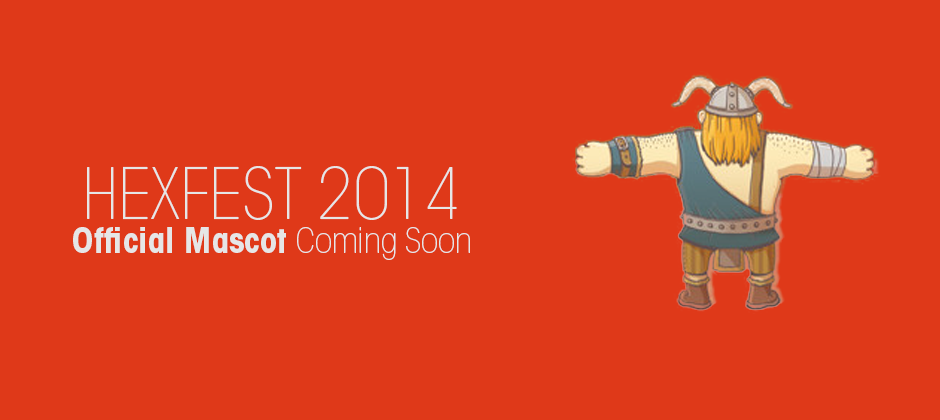
<style>
.page{position:relative;width:940px;height:420px;background:#df3919}
.page>*{position:absolute;margin:0}
.t1{font:70.5px "ITCAvantGardeStd-XLtCn";color:#e6e6e6;text-transform:uppercase}
.t2{font:35.1px "ITCAvantGardeStd-BoldCn";color:#e6e6e6}
.t3{font:35.1px "ITCAvantGardeStd-XLtCn";color:#e6e6e6}
</style>
<div class="page">
<p class="t1" style="left:87px;top:166px;width:370px;height:54px">HEXFEST 2014</p>
<p class="t2" style="left:73px;top:227px;width:397px;height:33px">Official Mascot <span class="t3">Coming Soon</span></p>
</div>
